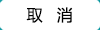
<style>
.page{position:relative;width:100px;height:30px;background:#ffffff}
.page>*{position:absolute;margin:0}
.t1{font:16px "MicrosoftYaHeiUI";color:#000000}
</style>
<div class="page">
<p class="t1" style="left:26px;top:7px;width:47px;height:16px">取   消</p>
</div>
